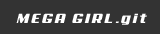
<style>
.page{position:relative;width:160px;height:34px;background:#333333}
.page>*{position:absolute;margin:0}
.t1{font:13.6px "Aero";letter-spacing:0.125em;color:#ffffff;scale:1.14 1}
</style>
<div class="page">
<p class="t1" style="left:16px;top:13px;width:131px;height:12px">MEGA GIRL.git</p>
</div>
